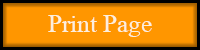
<style>
.page{position:relative;width:200px;height:50px;background:#ff9600}
.page>*{position:absolute;margin:0}
.t1{font:37.5px "Microsoft-Himalaya";color:#fcefdd}
</style>
<div class="page">
<p class="t1" style="left:48px;top:15px;width:104px;height:22px">Print Page</p>
</div>
